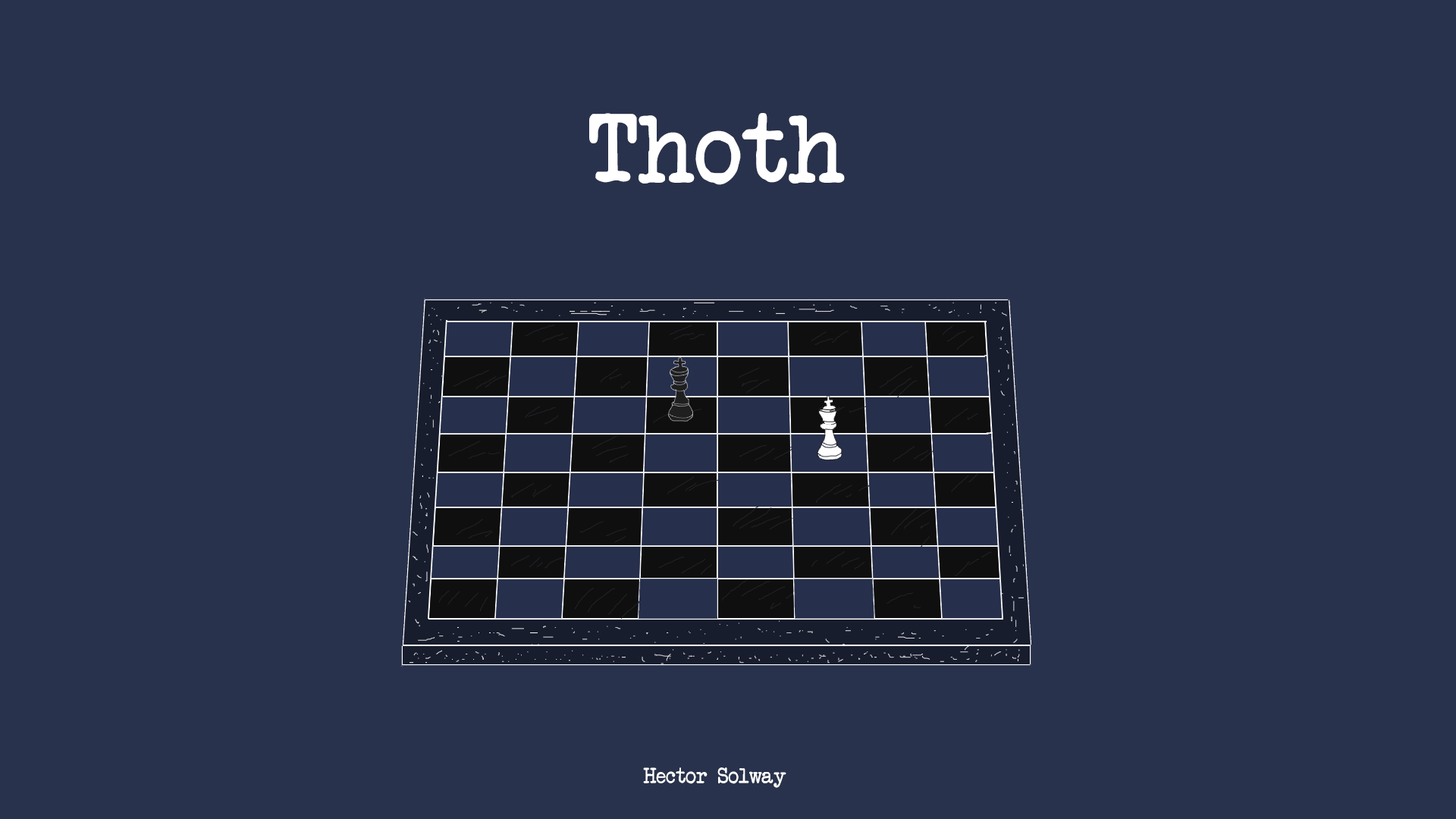
<style>
.page{position:relative;width:1456px;height:819px;background:#29324c}
.page>*{position:absolute;margin:0}
.t1{font:94.8px "AnotherTypewriter";color:#ffffff}
.t2{font:21.1px "AnotherTypewriter";color:#ffffff}
</style>
<div class="page">
<p class="t1" style="left:589px;top:113px;width:256px;height:72px">Thoth</p>
<p class="t2" style="left:643px;top:767px;width:143px;height:21px">Hector Solway</p>
</div>
